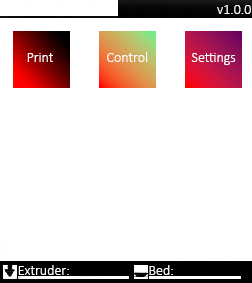
<style>
.page{position:relative;width:252px;height:283px;background:#ffffff}
.page>*{position:absolute;margin:0}
.t1{font:14px "Calibri-Light";color:#ffffff}
</style>
<div class="page">
<p class="t1" style="left:217px;top:5px;width:34px;height:9px">v1.0.0</p>
<p class="t1" style="left:27px;top:53px;width:26px;height:9px">Print</p>
<p class="t1" style="left:107px;top:52px;width:41px;height:10px">Control</p>
<p class="t1" style="left:191px;top:53px;width:45px;height:12px">Settings</p>
<p class="t1" style="left:18px;top:265px;width:51px;height:10px">Extruder:</p>
<p class="t1" style="left:149px;top:265px;width:24px;height:10px">Bed:</p>
</div>
